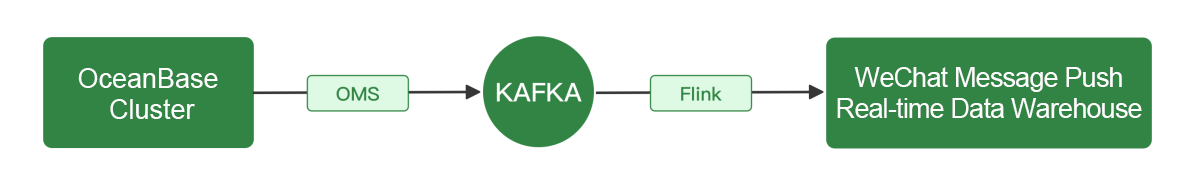
<style>
.page{position:relative;width:1195px;height:180px;background:#ffffff}
.page>*{position:absolute;margin:0}
.t1{font:27px/31px "ArialMT";color:#fcfcfc}
.t2{font:27px/31px "ArialMT";letter-spacing:-0.03em;color:#fcfcfc}
</style>
<div class="page">
<p class="t1" style="left:78px;top:68px;width:140px;height:51px;text-align:center">OceanBase <br>Cluster</p>
<p class="t2" style="left:837px;top:67px;width:305px;height:51px;text-align:center">WeChat Message Push<br>Real-time Data Warehouse</p>
</div>
